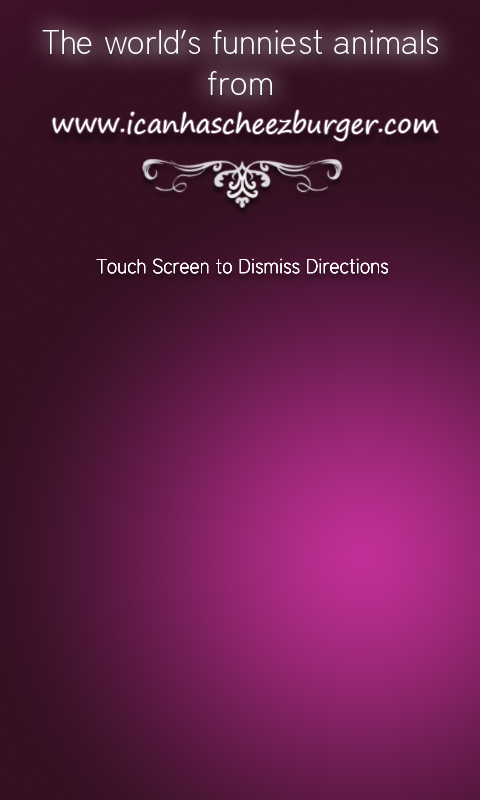
<style>
.page{position:relative;width:480px;height:800px}
.page>*{position:absolute;margin:0}
.t1{font:34px "District-Thin";color:#ffffff}
.t2{font:26px "SegoePrint";color:#ffffff}
.t3{font:30px "SegoePrint";color:#ffffff}
.t4{font:20px "District-Thin";color:#ffffff}
</style>
<div class="page">
<p class="t1" style="left:42px;top:30px;width:396px;height:65px;text-align:center">The world’s funniest animals from</p>
<p class="t2" style="left:52px;top:110px;width:387px;height:31px"><span class="t3"><br> <br></span>www.icanhascheezburger.com</p>
<p class="t4" style="left:96px;top:258px;width:292px;height:16px">Touch Screen to Dismiss Directions</p>
</div>
